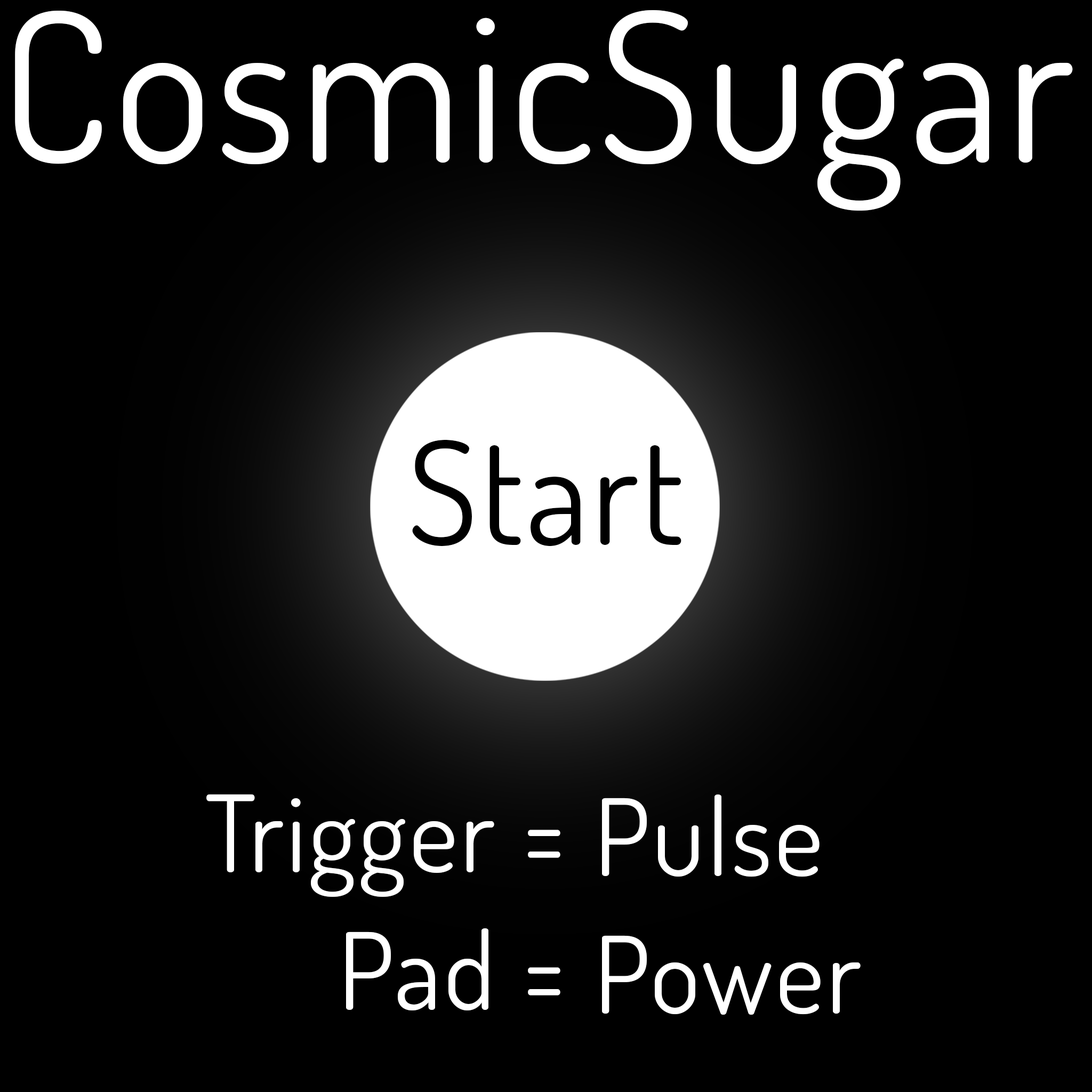
<style>
.page{position:relative;width:1092px;height:1092px;background:#000000}
.page>*{position:absolute;margin:0}
.t1{font:207.9px "Dosis-Regular";letter-spacing:0.02em;color:#ffffff}
.t2{font:142.6px "Dosis-Regular";letter-spacing:0.02em;color:#000000}
.t3{font:106.6px/137.8px "Dosis-Regular";letter-spacing:0.02em;color:#ffffff}
</style>
<div class="page">
<p class="t1" style="left:15px;top:10px;width:1058px;height:201px">CosmicSugar</p>
<p class="t2" style="left:412px;top:439px;width:269px;height:107px">Start</p>
<p class="t3" style="left:206px;top:794px;width:354px;height:216px;text-align:right">Trigger =<br>Pad =</p>
<p class="t3" style="left:602px;top:794px;width:259px;height:221px">Pulse<br>Power</p>
</div>
